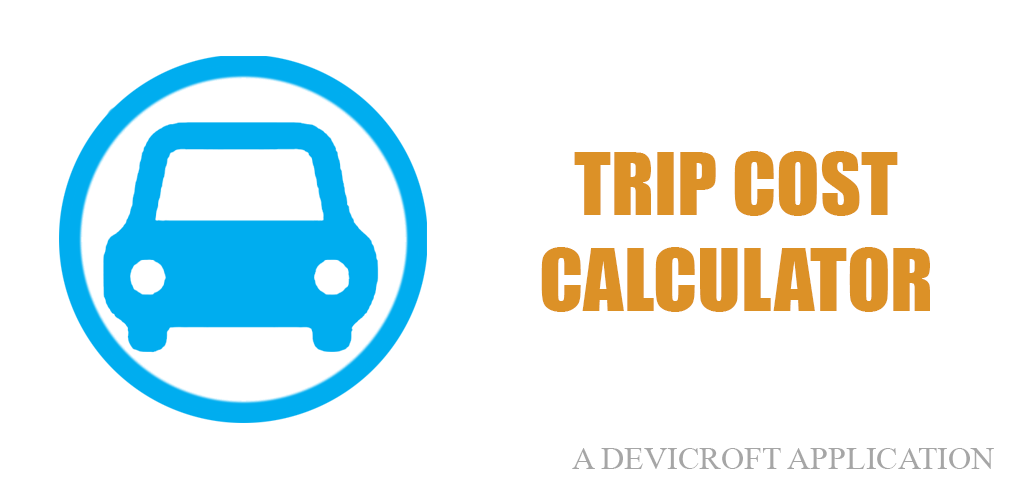
<style>
.page{position:relative;width:1024px;height:500px;background:#ffffff}
.page>*{position:absolute;margin:0}
.t1{font:80px "Impact";color:#dc9127}
.t2{font:48px "MicrosoftHimalaya";color:#a6a6a6}
</style>
<div class="page">
<p class="t1" style="left:541px;top:151px;width:389px;height:161px;text-align:center">TRIP COST<br>CALCULATOR</p>
<p class="t2" style="left:572px;top:448px;width:422px;height:21px">A DEVICROFT APPLICATION</p>
</div>
